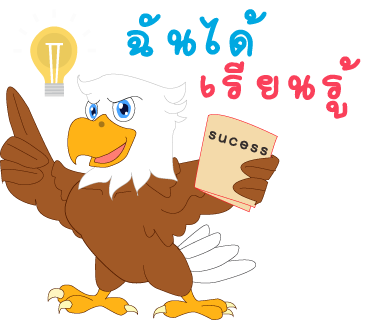
<style>
.page{position:relative;width:370px;height:320px;background:#ffffff}
.page>*{position:absolute;margin:0}
.t1{font:73px "2005_iannnnnMTV";letter-spacing:0.075em;color:#00a8e1;scale:1.06 1}
.t2{font:68px "2005_iannnnnMTV";letter-spacing:0.075em;color:#fa405a;scale:1.06 1}
.t3{font:26px "2005_iannnnnMTV";letter-spacing:0.075em;color:#362f2d;scale:1.06 1}
</style>
<div class="page">
<p class="t1" style="left:127px;top:9px;width:140px;height:48px">ฉันได้</p>
<p class="t2" style="left:200px;top:56px;width:161px;height:63px">เรียนรู้</p>
<p class="t3" style="left:208px;top:131px;width:60px;height:25px;rotate:17deg">sucess</p>
</div>
